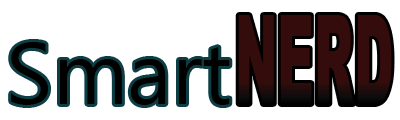
<style>
.page{position:relative;width:400px;height:120px;background:#ffffff}
.page>*{position:absolute;margin:0}
.t1{font:125px "Arial-Black";color:#350c0c;scale:0.41 1}
.t2{font:87px "MicrosoftNewTaiLue";color:#000000}
</style>
<div class="page">
<p class="t1" style="left:238px;top:15px;width:154px;height:89px">NERD</p>
<p class="t2" style="left:11px;top:42px;width:219px;height:63px">Smart</p>
</div>
